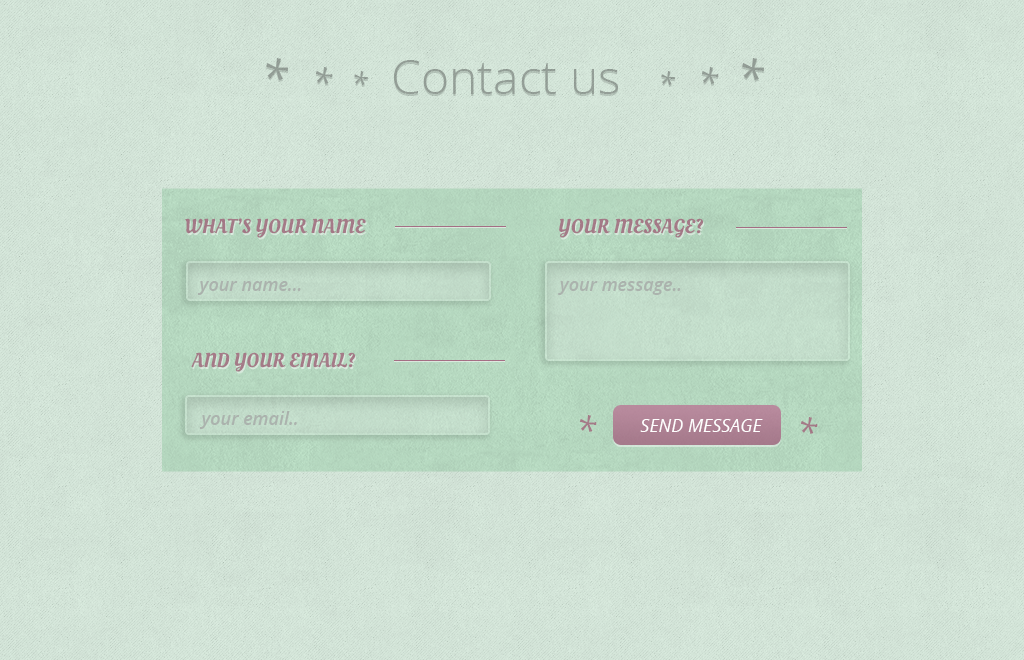
<style>
.page{position:relative;width:1024px;height:660px}
.page>*{position:absolute;margin:0}
.t1{font:48px "OpenSans-Light";color:#949e97}
.t2{font:48px "OpenSans-Italic";color:#949e97}
.t3{font:36px "OpenSans-Italic";color:#949e97}
.t4{font:30px "OpenSans-Italic";color:#949e97}
.t5{font:20px "OleoScript-Regular";color:#a47987}
.t6{font:18px "OpenSans-SemiboldItalic";color:#959f98}
.t7{font:20px "OleoScript-Regular";color:#a57b88}
.t8{font:36px "OpenSans-Italic";color:#a57b88}
.t9{font:18px "OpenSans-Italic";color:#ffffff}
.t10{font:36px "OpenSans-Italic";color:#a47a87}
</style>
<div class="page">
<p class="t1" style="left:266px;top:58px;width:498px;height:36px"><span class="t2">*  </span><span class="t3">*  </span><span class="t4">*   </span>Contact us   <span class="t4">*   </span><span class="t3">*  </span><span class="t2">*</span></p>
<p class="t5" style="left:185px;top:218px;width:181px;height:20px">WHAT’S YOUR NAME</p>
<p class="t5" style="left:559px;top:218px;width:144px;height:20px">YOUR MESSAGE?</p>
<p class="t6" style="left:197px;top:281px;width:104px;height:14px">your name...</p>
<p class="t6" style="left:558px;top:281px;width:123px;height:14px">your message..</p>
<p class="t7" style="left:191px;top:352px;width:164px;height:20px">AND YOUR EMAIL?</p>
<p class="t6" style="left:199px;top:411px;width:98px;height:18px">your email..</p>
<p class="t8" style="left:579px;top:415px;width:18px;height:17px">*</p>
<p class="t9" style="left:640px;top:419px;width:123px;height:13px">SEND MESSAGE</p>
<p class="t10" style="left:800px;top:417px;width:18px;height:17px">*</p>
</div>
